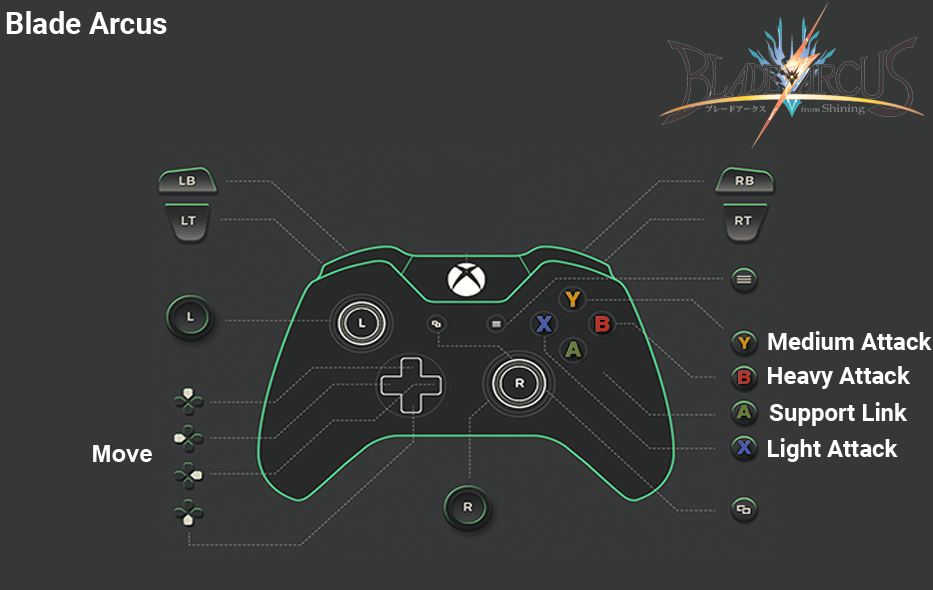
<style>
.page{position:relative;width:933px;height:590px;background:#363838}
.page>*{position:absolute;margin:0}
.t1{font:30px "Roboto-Bold";color:#ffffff}
.t2{font:24px "Roboto-Bold";color:#ffffff}
.t3{font:24px "Arial-BoldMT";color:#fefefe}
</style>
<div class="page">
<p class="t1" style="left:6px;top:11px;width:161px;height:23px">Blade Arcus</p>
<p class="t2" style="left:768px;top:331px;width:164px;height:19px">Medium Attack</p>
<p class="t2" style="left:768px;top:366px;width:143px;height:23px">Heavy Attack</p>
<p class="t2" style="left:769px;top:402px;width:139px;height:24px">Support Link</p>
<p class="t2" style="left:768px;top:438px;width:130px;height:24px">Light Attack</p>
<p class="t3" style="left:93px;top:445px;width:59px;height:17px">Move</p>
</div>
